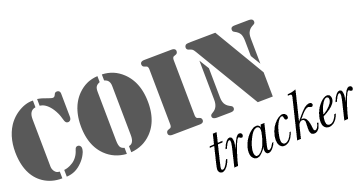
<style>
.page{position:relative;width:363px;height:191px;background:#ffffff}
.page>*{position:absolute;margin:0}
.t1{font:120px "Stencil";color:#595959}
.t2{font:70px "Baskerville-Italic";color:#000000}
</style>
<div class="page">
<p class="t1" style="left:11px;top:19px;width:262px;height:162px;rotate:-21deg">coin</p>
<p class="t2" style="left:209px;top:86px;width:144px;height:87px;rotate:-23deg">tracker</p>
</div>
